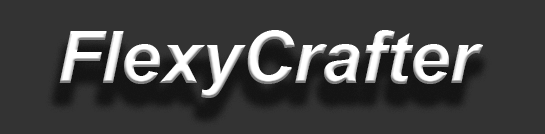
<style>
.page{position:relative;width:545px;height:134px;background:#333333}
.page>*{position:absolute;margin:0}
.t1{font:72px "Arial-BoldItalicMT";color:#ffffff}
</style>
<div class="page">
<p class="t1" style="left:59px;top:30px;width:424px;height:68px">FlexyCrafter</p>
</div>
